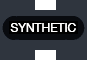
<style>
.page{position:relative;width:87px;height:60px;background:#2f353e}
.page>*{position:absolute;margin:0}
.t1{font:12px "HelveticaNeue";color:#ffffff}
</style>
<div class="page">
<p class="t1" style="left:10px;top:23px;width:66px;height:9px">SYNTHETIC</p>
<p class="t1" style="left:10px;top:23px;width:66px;height:9px">SYNTHETIC</p>
</div>
